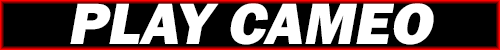
<style>
.page{position:relative;width:500px;height:50px;background:#000000}
.page>*{position:absolute;margin:0}
.t1{font:60.5px "FranklinGothic-Heavy";color:#ffffff;font-style:italic}
</style>
<div class="page">
<p class="t1" style="left:70px;top:3px;width:364px;height:42px">PLAY CAMEO</p>
</div>
